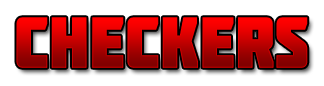
<style>
.page{position:relative;width:324px;height:86px;background:#ffffff}
.page>*{position:absolute;margin:0}
.t1{font:72px "Molot";letter-spacing:0.01em;scale:0.91 1}
</style>
<div class="page">
<p class="t1" style="left:16px;top:17px;width:292px;height:51px">Checkers</p>
</div>
